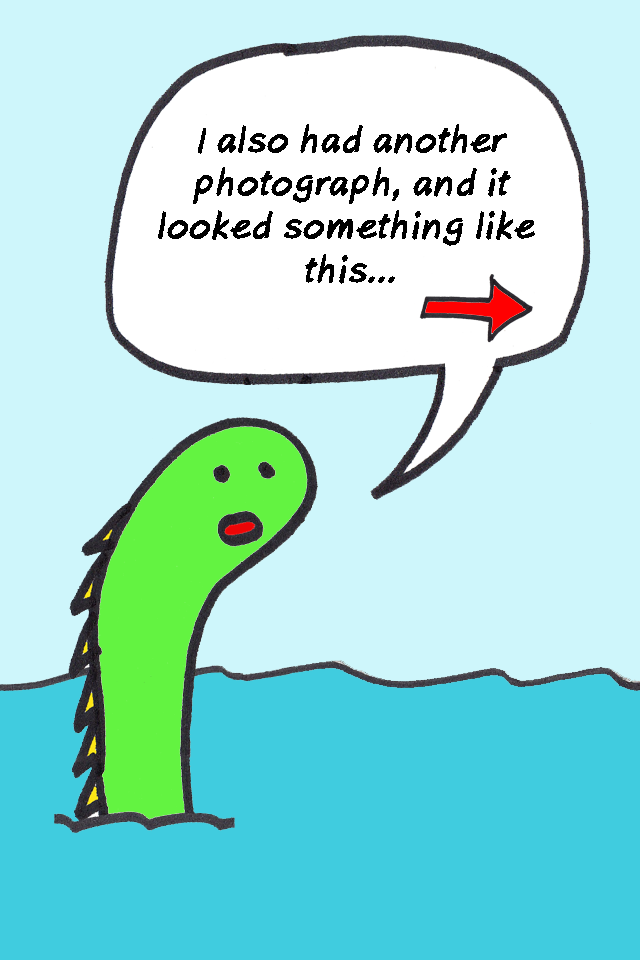
<style>
.page{position:relative;width:640px;height:960px;background:#cef6fb}
.page>*{position:absolute;margin:0}
.t1{font:36px "AxureHandwriting-BoldItalic";color:#000000}
</style>
<div class="page">
<p class="t1" style="left:158px;top:124px;width:377px;height:160px;text-align:center">I also had another<br>photograph, and it<br>looked something like <br>this...</p>
</div>
